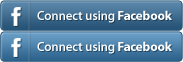
<style>
.page{position:relative;width:183px;height:62px}
.page>*{position:absolute;margin:0}
.t1{font:13px "MyriadPro-Semibold";letter-spacing:-0.015em;color:#ffffff}
.t2{font:13px "MyriadPro-Bold";letter-spacing:-0.015em;color:#ffffff}
</style>
<div class="page">
<p class="t1" style="left:37px;top:10px;width:135px;height:13px">Connect using <span class="t2">Facebook</span></p>
<p class="t1" style="left:37px;top:41px;width:135px;height:13px">Connect using <span class="t2">Facebook</span></p>
</div>
